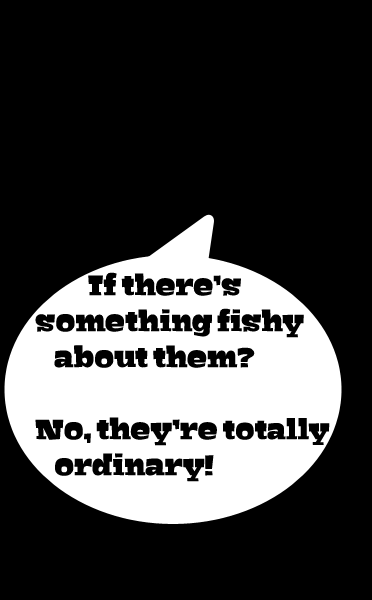
<style>
.page{position:relative;width:372px;height:600px;background:#000000}
.page>*{position:absolute;margin:0}
.t1{font:30px "Bigfish-Black";color:#000000}
.t2{font:29px "Bigfish-Black";color:#000000}
</style>
<div class="page">
<p class="t1" style="left:35px;top:272px;width:295px;height:210px">If there’s <br>something fishy <br>    about them?<br><br>No, they’re <span class="t2">totally</span>  <br>    ordinary!</p>
</div>
